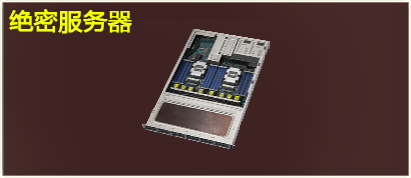
<style>
.page{position:relative;width:411px;height:178px}
.page>*{position:absolute;margin:0}
.t1{font:24px "MicrosoftYaHeiUI";color:#f4ff00;font-weight:bold}
</style>
<div class="page">
<p class="t1" style="left:9px;top:9px;width:123px;height:25px">绝密服务器</p>
</div>
